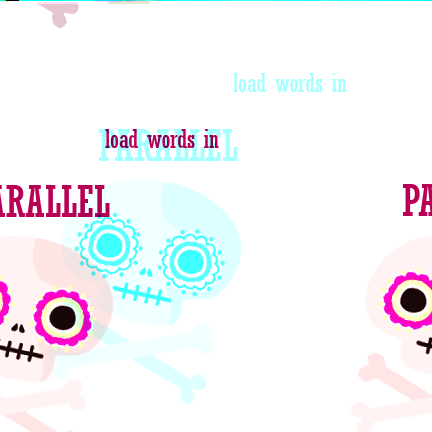
<style>
.page{position:relative;width:432px;height:432px;background:#ffffff}
.page>*{position:absolute;margin:0}
.t1{font:25px "Rockwell-Condensed";color:#a4ffff}
.t2{font:43px "Rockwell-Condensed";color:#a4ffff}
</style>
<div class="page">
<p class="t1" style="left:233px;top:72px;width:114px;height:19px">load words in</p>
<p class="t2" style="left:99px;top:128px;width:139px;height:32px">PARALLEL</p>
</div>
